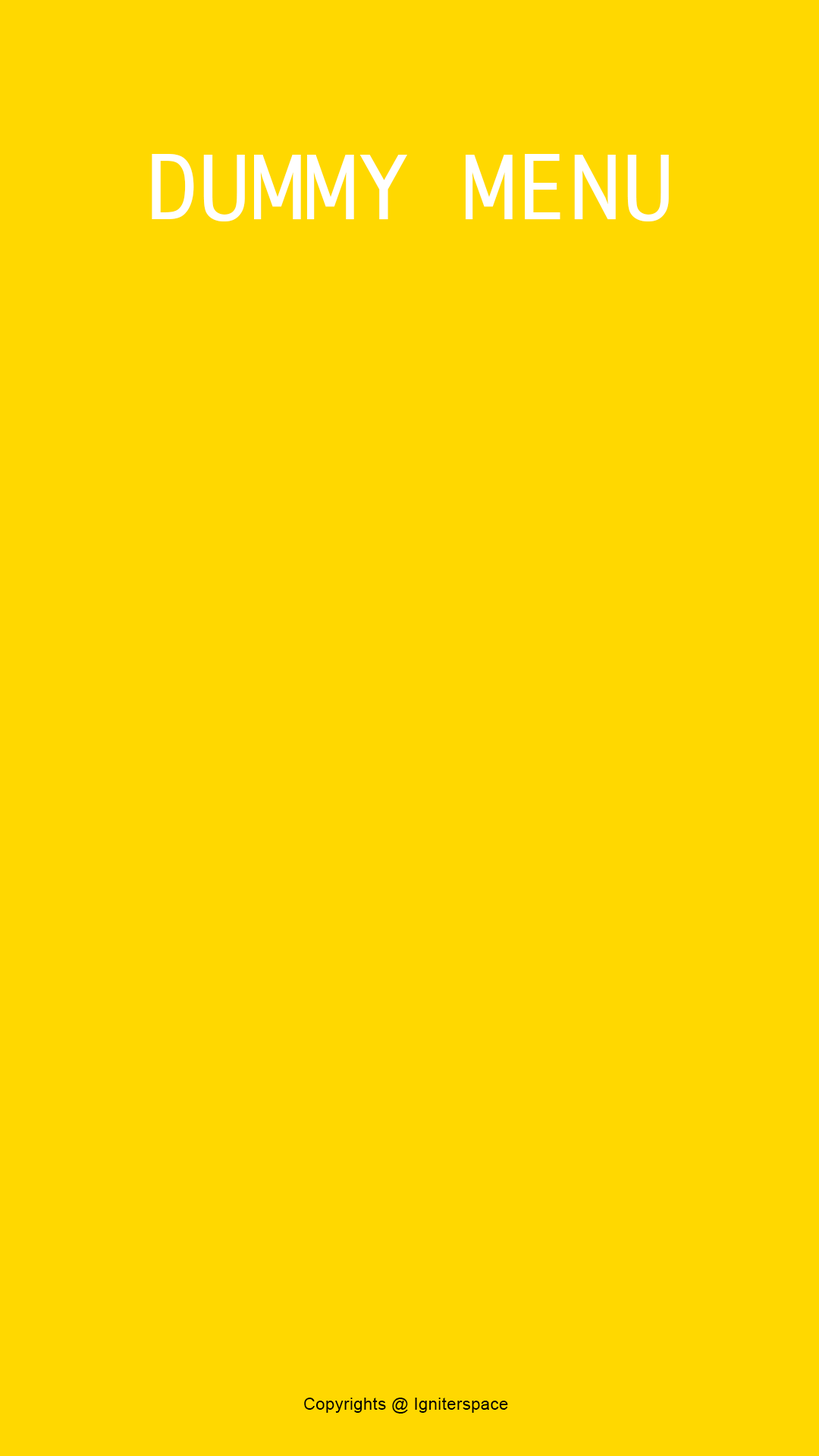
<style>
.page{position:relative;width:819px;height:1456px;background:#ffd800}
.page>*{position:absolute;margin:0}
.t1{font:85.5px "Ayuthaya";letter-spacing:0.02em;color:#ffffff}
.t2{font:16.7px "ArialMT";letter-spacing:0.02em;color:#000000}
</style>
<div class="page">
<p class="t1" style="left:152px;top:154px;width:517px;height:67px">DUMMY MENU</p>
<p class="t2" style="left:304px;top:1398px;width:204px;height:16px">Copyrights @ Igniterspace</p>
</div>
